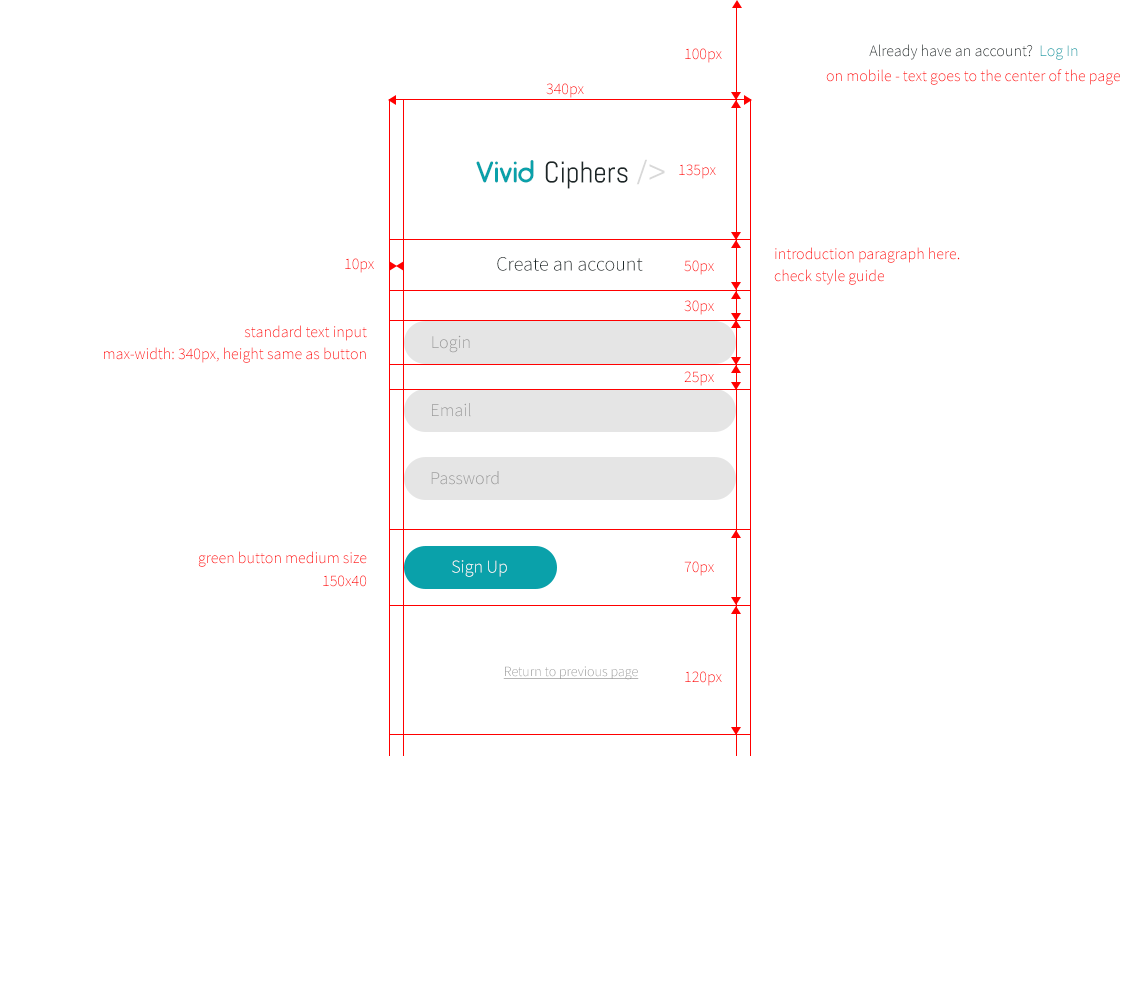
<style>
.page{position:relative;width:1140px;height:1000px;background:#ffffff}
.page>*{position:absolute;margin:0}
.t1{font:16px "SourceSansPro-Light"}
.t2{font:16px "SourceSansPro-Light";color:#1d2829}
.t3{font:30px "Abel-Regular";color:#1d2728}
.t4{font:30px "Arciform";color:#0aa1aa}
.t5{font:30px "Abel-Regular";color:#d8d8d8}
.t6{font:20px "SourceSansPro-Light";color:#1d2829}
.t7{font:16px/22px "SourceSansPro-Light";color:#ff0000}
.t8{font:16px/22px "SourceSansPro-Light"}
.t9{font:18px "SourceSansPro-Light";color:#9a9a9a}
.t10{font:16px "SourceSansPro-Light";color:#ff0000}
.t11{font:18px "SourceSansPro-Light";color:#ffffff}
.t12{font:14px "SourceSansPro-Light";color:#9a9a9a;text-decoration:underline}
</style>
<div class="page">
<p class="t1" style="left:685px;top:48px;width:37px;height:15px">100px</p>
<p class="t2" style="left:869px;top:44px;width:209px;height:16px">Already have an account?  Log In</p>
<p class="t1" style="left:826px;top:69px;width:294px;height:16px">on mobile - text goes to the center of the page</p>
<p class="t1" style="left:546px;top:83px;width:38px;height:15px">340px</p>
<p class="t3" style="left:476px;top:159px;width:189px;height:30px"><span class="t4">Vivid </span>Ciphers <span class="t5">/&gt;</span></p>
<p class="t1" style="left:679px;top:164px;width:37px;height:15px">135px</p>
<p class="t6" style="left:497px;top:257px;width:146px;height:14px">Create an account</p>
<p class="t7" style="left:774px;top:247px;width:186px;height:38px">introduction paragraph here.<br>check style guide</p>
<p class="t1" style="left:345px;top:258px;width:29px;height:15px">10px</p>
<p class="t1" style="left:684px;top:260px;width:30px;height:15px">50px</p>
<p class="t1" style="left:684px;top:300px;width:30px;height:15px">30px</p>
<p class="t8" style="left:104px;top:325px;width:263px;height:38px;text-align:right">standard text input<br>max-width: 340px, height same as button</p>
<p class="t9" style="left:432px;top:335px;width:38px;height:18px">Login</p>
<p class="t10" style="left:684px;top:371px;width:30px;height:15px">25px</p>
<p class="t9" style="left:432px;top:403px;width:39px;height:14px">Email</p>
<p class="t9" style="left:431px;top:471px;width:68px;height:14px">Password</p>
<p class="t1" style="left:198px;top:551px;width:169px;height:16px">green button medium size</p>
<p class="t11" style="left:452px;top:560px;width:55px;height:17px">Sign Up</p>
<p class="t1" style="left:684px;top:561px;width:30px;height:15px">70px</p>
<p class="t1" style="left:323px;top:575px;width:44px;height:12px">150x40</p>
<p class="t12" style="left:503px;top:666px;width:136px;height:14px">Return to previous page</p>
<p class="t1" style="left:685px;top:671px;width:37px;height:15px">120px</p>
</div>
